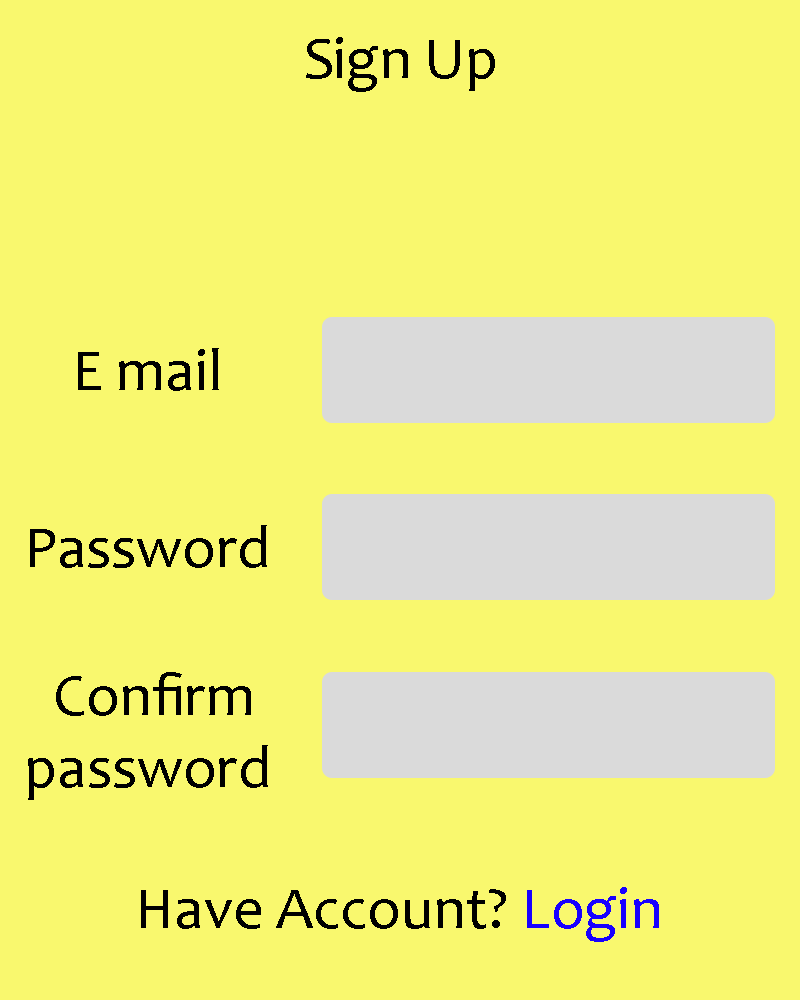
<style>
.page{position:relative;width:800px;height:1000px;background:#f9f86e}
.page>*{position:absolute;margin:0}
.t1{font:60px "Candara";color:#000000}
.t2{font:60px "Candara";color:#1800ff}
</style>
<div class="page">
<p class="t1" style="left:306px;top:37px;width:189px;height:55px">Sign Up</p>
<p class="t1" style="left:78px;top:348px;width:141px;height:43px">E mail</p>
<p class="t1" style="left:30px;top:525px;width:237px;height:43px">Password</p>
<p class="t1" style="left:28px;top:672px;width:240px;height:128px;text-align:center">Confirm <br>password</p>
<p class="t1" style="left:141px;top:887px;width:518px;height:55px">Have Account? <span class="t2">Login</span></p>
</div>
